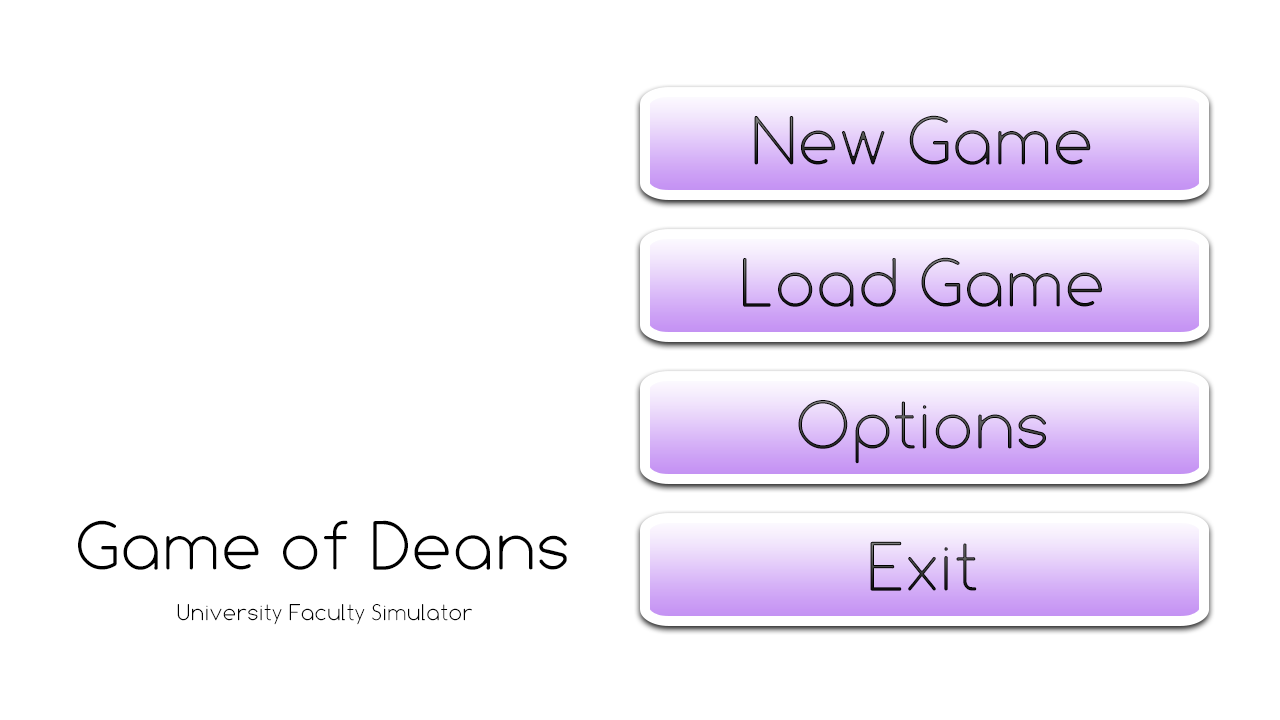
<style>
.page{position:relative;width:1280px;height:720px;background:#ffffff}
.page>*{position:absolute;margin:0}
.t1{font:72px "Comfortaa-Light"}
.t2{font:72px "Comfortaa-Light";color:#000000}
.t3{font:24px "Comfortaa-Light";color:#000000}
</style>
<div class="page">
<p class="t1" style="left:754px;top:115px;width:337px;height:50px">New Game</p>
<p class="t1" style="left:743px;top:257px;width:359px;height:50px">Load Game</p>
<p class="t1" style="left:798px;top:400px;width:248px;height:64px">Options</p>
<p class="t2" style="left:78px;top:520px;width:489px;height:50px">Game of Deans</p>
<p class="t1" style="left:870px;top:541px;width:107px;height:50px">Exit</p>
<p class="t3" style="left:177px;top:604px;width:295px;height:21px">University Faculty Simulator</p>
</div>
